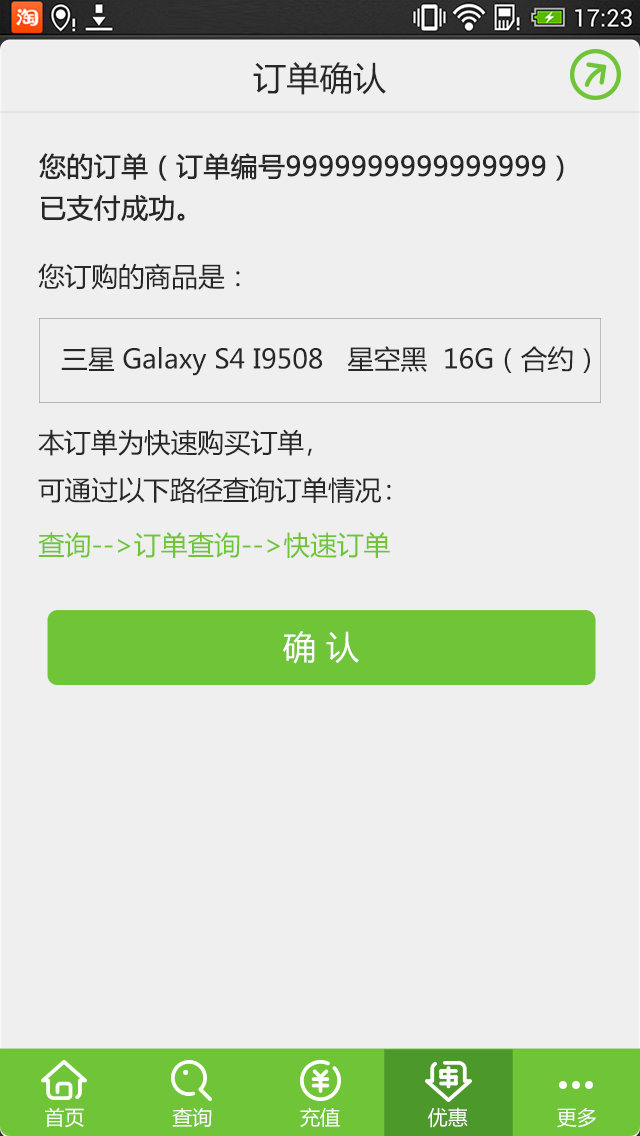
<style>
.page{position:relative;width:640px;height:1136px;background:#efefef}
.page>*{position:absolute;margin:0}
.t1{font:33.3px "MicrosoftYaHei";color:#272727}
.t2{font:26.7px/41.5px "MicrosoftYaHei";color:#272727;font-weight:bold}
.t3{font:26.7px "MicrosoftYaHei";color:#272727}
.t4{font:26.7px/47.4px "MicrosoftYaHei";color:#272727}
.t5{font:26.7px "MicrosoftYaHei";color:#6fc537}
.t6{font:33.3px "MicrosoftYaHei";color:#ffffff}
.t7{font:20px "MicrosoftYaHei";color:#ffffff}
</style>
<div class="page">
<p class="t1" style="left:253px;top:62px;width:133px;height:33px">订单确认</p>
<p class="t2" style="left:39px;top:153px;width:525px;height:69px">您的订单（订单编号9999999999999999）<br>已支付成功。</p>
<p class="t3" style="left:38px;top:263px;width:202px;height:27px">您订购的商品是：</p>
<p class="t3" style="left:61px;top:346px;width:529px;height:30px">三星 Galaxy S4 I9508   星空黑  16G（合约）</p>
<p class="t4" style="left:38px;top:429px;width:353px;height:74px">本订单为快速购买订单，<br>可通过以下路径查询订单情况：</p>
<p class="t5" style="left:38px;top:532px;width:352px;height:26px">查询--&gt;订单查询--&gt;快速订单</p>
<p class="t6" style="left:283px;top:631px;width:76px;height:33px">确 认</p>
<p class="t7" style="left:45px;top:1107px;width:39px;height:21px">首页</p>
<p class="t7" style="left:172px;top:1107px;width:40px;height:20px">查询</p>
<p class="t7" style="left:300px;top:1107px;width:40px;height:20px">充值</p>
<p class="t7" style="left:428px;top:1107px;width:40px;height:21px">优惠</p>
<p class="t7" style="left:557px;top:1108px;width:39px;height:20px">更多</p>
</div>
